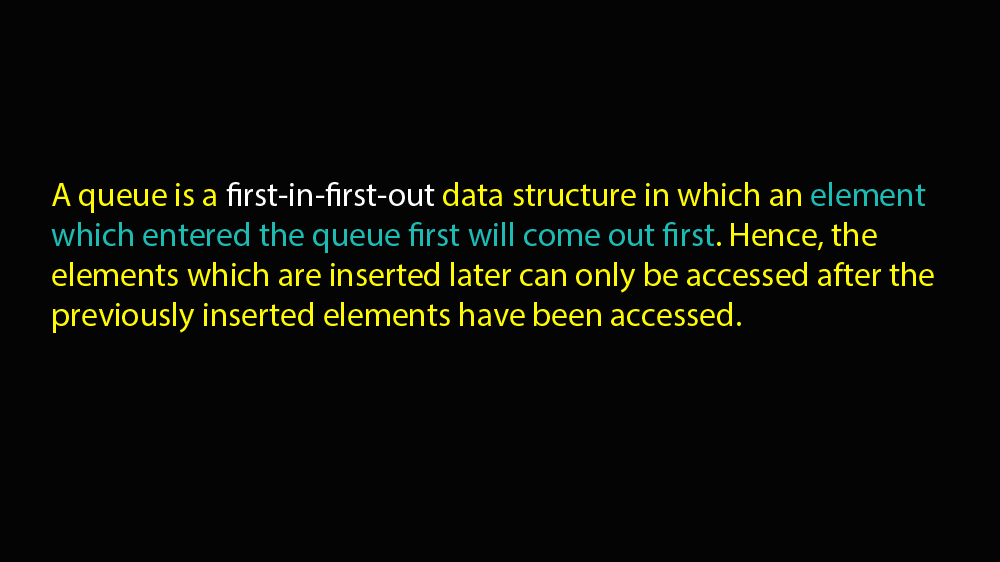
<style>
.page{position:relative;width:1000px;height:562px;background:#050404}
.page>*{position:absolute;margin:0}
.t1{font:33.3px "MyriadPro-Regular";color:#fefb04}
.t2{font:33.3px "MyriadPro-Regular";color:#fefefe}
.t3{font:33.3px "MyriadPro-Regular";color:#1cbbb4}
</style>
<div class="page">
<p class="t1" style="left:51px;top:182px;width:883px;height:151px">A queue is a <span class="t2">first-in-first-out </span>data structure in which an <span class="t3">element which entered the queue first will come out first</span>. Hence, the elements which are inserted later can only be accessed after the previously inserted elements have been accessed.</p>
</div>
